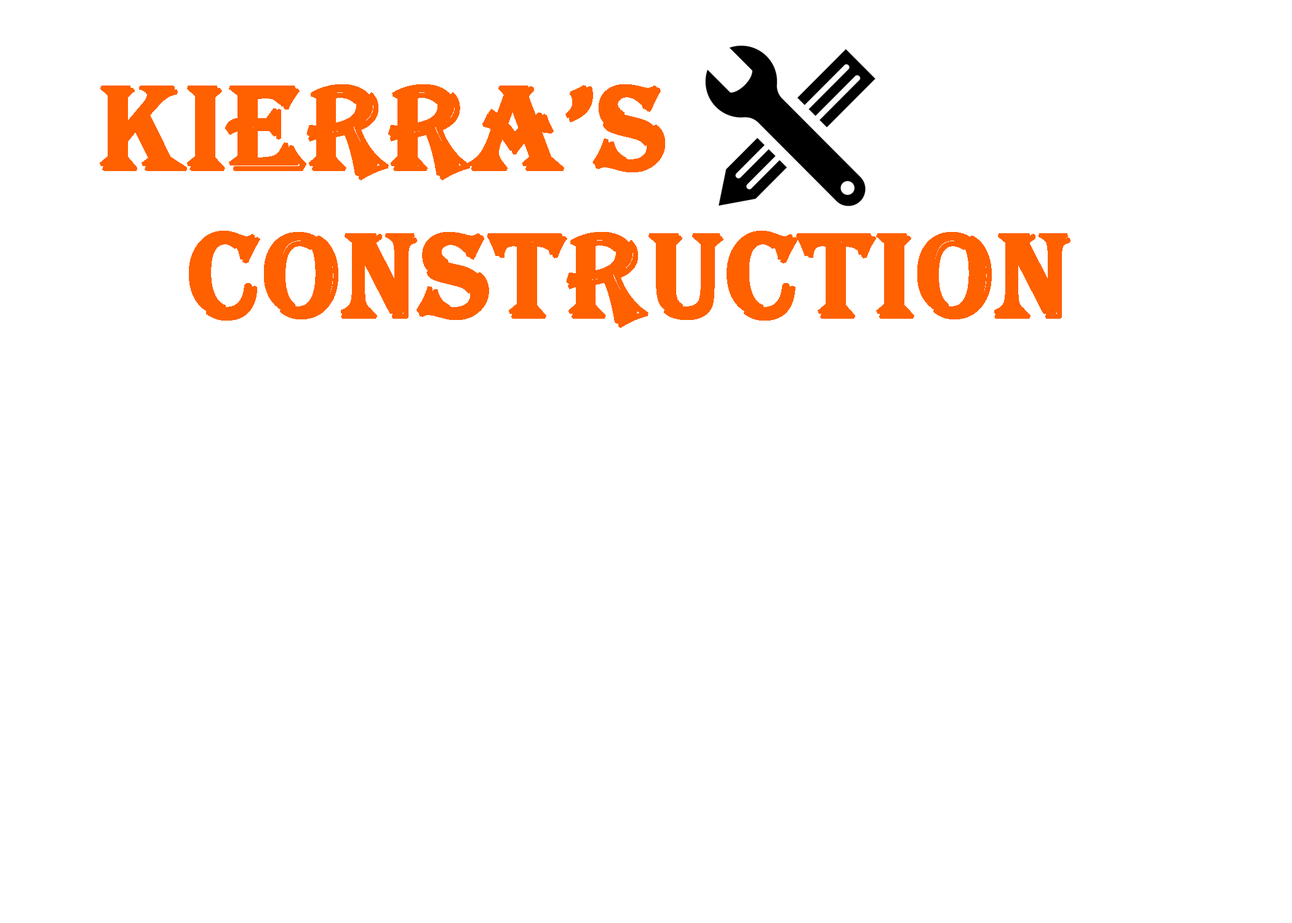
<style>
.page{position:relative;width:1292px;height:923px;background:#ffffff}
.page>*{position:absolute;margin:0}
.t1{font:123.1px "Algerian";color:#ff6000;font-weight:bold}
</style>
<div class="page">
<p class="t1" style="left:100px;top:84px;width:971px;height:244px">Kierra’s <br>    Construction</p>
</div>
